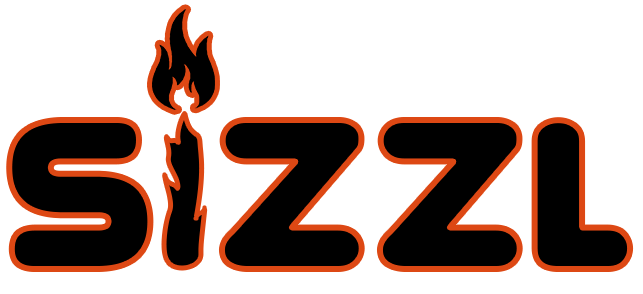
<style>
.page{position:relative;width:643px;height:294px;background:#ffffff}
.page>*{position:absolute;margin:0}
.t1{font:200px "YoureGone-Regular";letter-spacing:-0.04em;color:#000000;scale:1.16 1}
</style>
<div class="page">
<p class="t1" style="left:9px;top:120px;width:622px;height:149px">sizzl</p>
</div>
